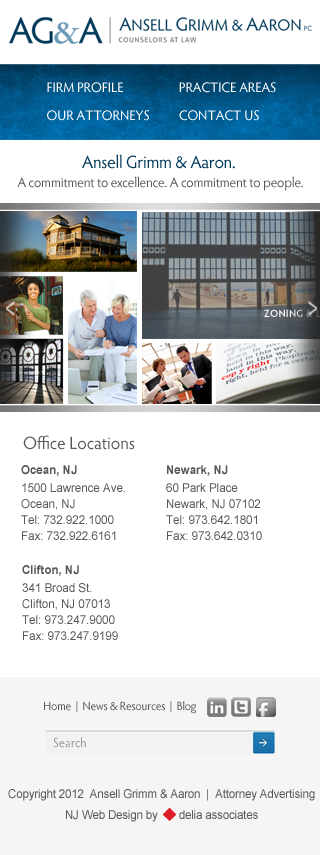
<style>
.page{position:relative;width:320px;height:855px;background:#ffffff}
.page>*{position:absolute;margin:0}
.t1{font:14px/24px "HypatiaSansPro-Regular";color:#ffffff;scale:0.96 1}
.t2{font:14px "HypatiaSansPro-Regular";letter-spacing:-0.015em;color:#58585a;scale:0.96 1}
.t3{font:18px "HypatiaSansPro-Regular";letter-spacing:-0.015em;color:#00395a;scale:0.96 1}
.t4{font:10.5px "HypatiaSansPro-Semibold";letter-spacing:0.029em;color:#ffffff;scale:0.96 1}
.t5{font:18px "HypatiaSansPro-Regular";letter-spacing:-0.005em;color:#58585a;scale:0.97 1}
.t6{font:12px/12px "ArialMT";color:#58585a;scale:0.96 1}
.t7{font:12px/12px "Arial-BoldMT";color:#58585a;scale:0.96 1}
.t8{font:12px/14px "ArialMT";color:#58585a;scale:0.96 1}
.t9{font:12px "HypatiaSansPro-Regular";letter-spacing:-0.015em;color:#58585a;scale:0.96 1}
.t10{font:13px "HypatiaSansPro-Regular";color:#969697;scale:0.96 1}
.t11{font:12px "ArialMT";letter-spacing:-0.015em;color:#58585a;scale:0.96 1}
.t12{font:12px/17px "ArialMT";letter-spacing:-0.015em;color:#58585a;scale:0.96 1}
</style>
<div class="page">
<p class="t1" style="left:47px;top:82px;width:229px;height:39px">FIRM PROFILE                   PRACTICE AREAS<br>OUR ATTORNEYS          CONTACT US</p>
<p class="t2" style="left:17px;top:154px;width:286px;height:37px;text-align:center"><span class="t3">Ansell Grimm &amp; Aaron. <br></span>A commitment to excellence. A commitment to people.</p>
<p class="t4" style="left:264px;top:309px;width:56px;height:8px">ZONING &amp; LAND USE</p>
<p class="t5" style="left:23px;top:435px;width:112px;height:15px">Office Locations</p>
<p class="t6" style="left:21px;top:465px;width:104px;height:75px"><span class="t7">Ocean, NJ<br></span><span class="t8">1500 Lawrence Ave</span>.<br>Ocean, NJ<br>Tel: 732.922.1000<br>Fax: 732.922.6161</p>
<p class="t6" style="left:166px;top:465px;width:96px;height:75px"><span class="t7">Newark, NJ<br></span><span class="t8">60 Park Place<br></span>Newark, NJ 07102<br>Tel: 973.642.1801<br>Fax: 973.642.0310</p>
<p class="t6" style="left:22px;top:565px;width:96px;height:75px"><span class="t7">Clifton, NJ<br></span><span class="t8">341 Broad St.<br></span>Clifton, NJ 07013<br>Tel: 973.247.9000<br>Fax: 973.247.9199</p>
<p class="t9" style="left:44px;top:701px;width:153px;height:13px">Home  |  News &amp; Resources  |  Blog</p>
<p class="t10" style="left:53px;top:737px;width:33px;height:11px">Search</p>
<p class="t11" style="left:8px;top:789px;width:307px;height:33px;text-align:center">Copyright 2012  Ansell Grimm &amp; Aaron  |  Attorney Advertising<br><span class="t12">NJ Web Design by       delia associates</span></p>
</div>
